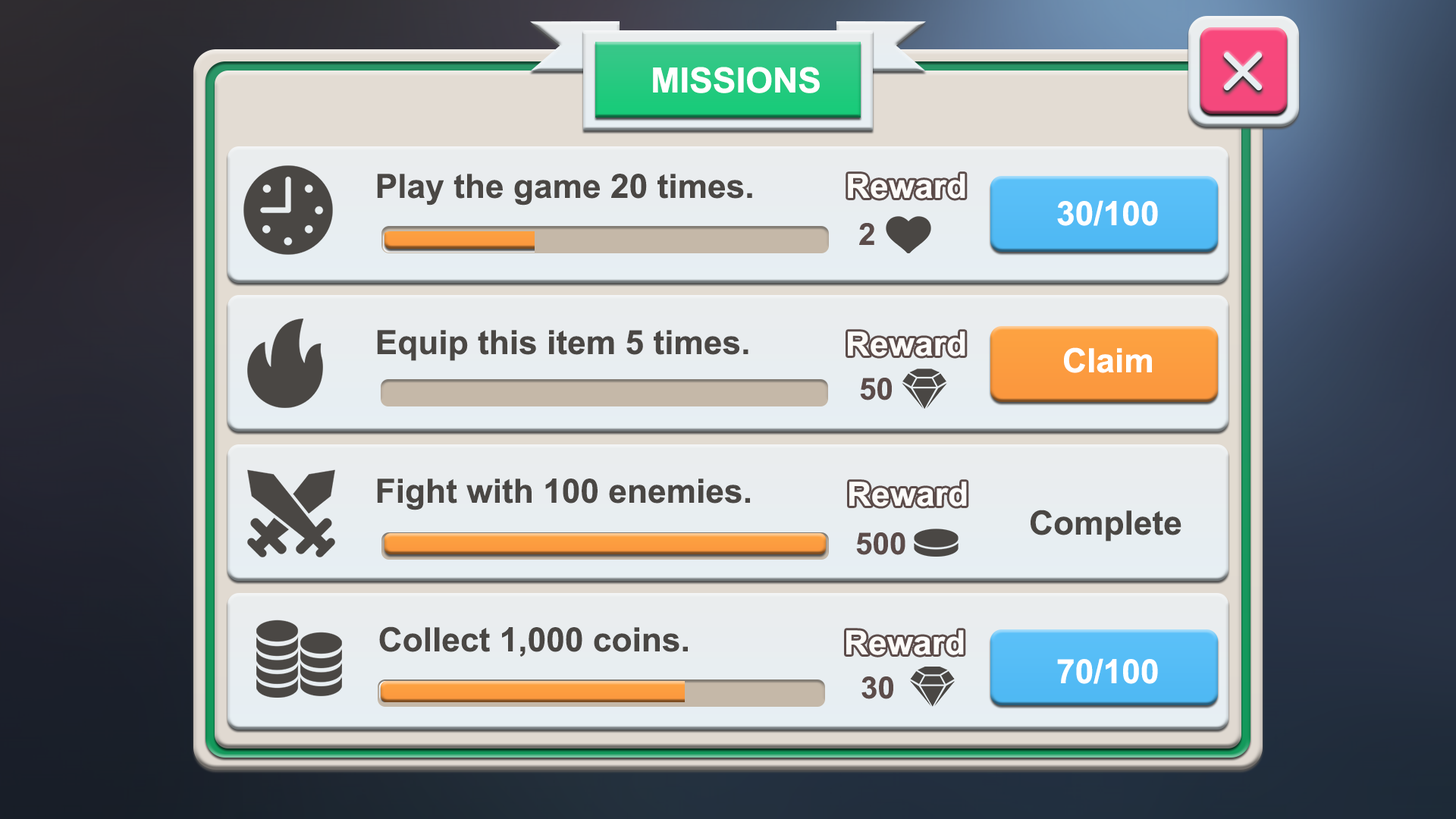
<style>
.page{position:relative;width:1456px;height:819px}
.page>*{position:absolute;margin:0}
.t1{font:34.9px "Arial-BoldMT";color:#ffffff}
.t2{font:33.4px "Arial-BoldMT";color:#4a4744}
.t3{font:33.4px "Arial-BoldMT";color:#ffffff}
.t4{font:30.3px "Arial-BoldMT";color:#5c4c4a}
</style>
<div class="page">
<p class="t1" style="left:653px;top:67px;width:167px;height:26px">MISSIONS</p>
<p class="t2" style="left:377px;top:174px;width:375px;height:32px">Play the game 20 times.</p>
<p class="t3" style="left:848px;top:174px;width:117px;height:25px">Reward</p>
<p class="t3" style="left:1057px;top:200px;width:101px;height:26px">30/100</p>
<p class="t4" style="left:859px;top:223px;width:15px;height:22px">2</p>
<p class="t2" style="left:377px;top:330px;width:371px;height:31px">Equip this item 5 times.</p>
<p class="t3" style="left:848px;top:331px;width:117px;height:25px">Reward</p>
<p class="t3" style="left:1064px;top:347px;width:88px;height:26px">Claim</p>
<p class="t4" style="left:860px;top:378px;width:32px;height:22px">50</p>
<p class="t2" style="left:377px;top:479px;width:373px;height:31px">Fight with 100 enemies.</p>
<p class="t3" style="left:849px;top:482px;width:118px;height:25px">Reward</p>
<p class="t2" style="left:1031px;top:510px;width:150px;height:31px">Complete</p>
<p class="t4" style="left:856px;top:532px;width:49px;height:23px">500</p>
<p class="t2" style="left:379px;top:626px;width:309px;height:31px">Collect 1,000 coins.</p>
<p class="t3" style="left:846px;top:630px;width:118px;height:25px">Reward</p>
<p class="t3" style="left:1057px;top:658px;width:101px;height:26px">70/100</p>
<p class="t4" style="left:861px;top:676px;width:32px;height:23px">30</p>
</div>
